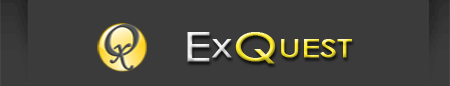
<style>
.page{position:relative;width:450px;height:86px;background:#3b3b3b}
.page>*{position:absolute;margin:0}
.t1{font:25.4px "CenturyGothic";font-weight:bold;scale:1.33 1}
.t2{font:39.9px "CenturyGothic";font-weight:bold;scale:1.26 1}
</style>
<div class="page">
<p class="t1" style="left:187px;top:32px;width:165px;height:32px"><span class="t2">E</span>X<span class="t2">Q</span>UEST</p>
</div>
